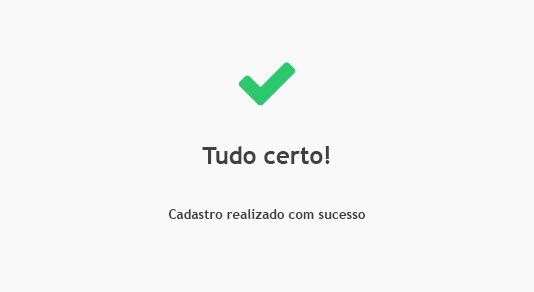
<style>
.page{position:relative;width:534px;height:292px;background:#faf9f9}
.page>*{position:absolute;margin:0}
.t1{font:24px "TrebuchetMS-Bold";color:#404040}
.t2{font:13.3px "TrebuchetMS-Bold";color:#404040}
</style>
<div class="page">
<p class="t1" style="left:202px;top:146px;width:128px;height:18px">Tudo certo!</p>
<p class="t2" style="left:168px;top:209px;width:198px;height:10px">Cadastro realizado com sucesso</p>
</div>
